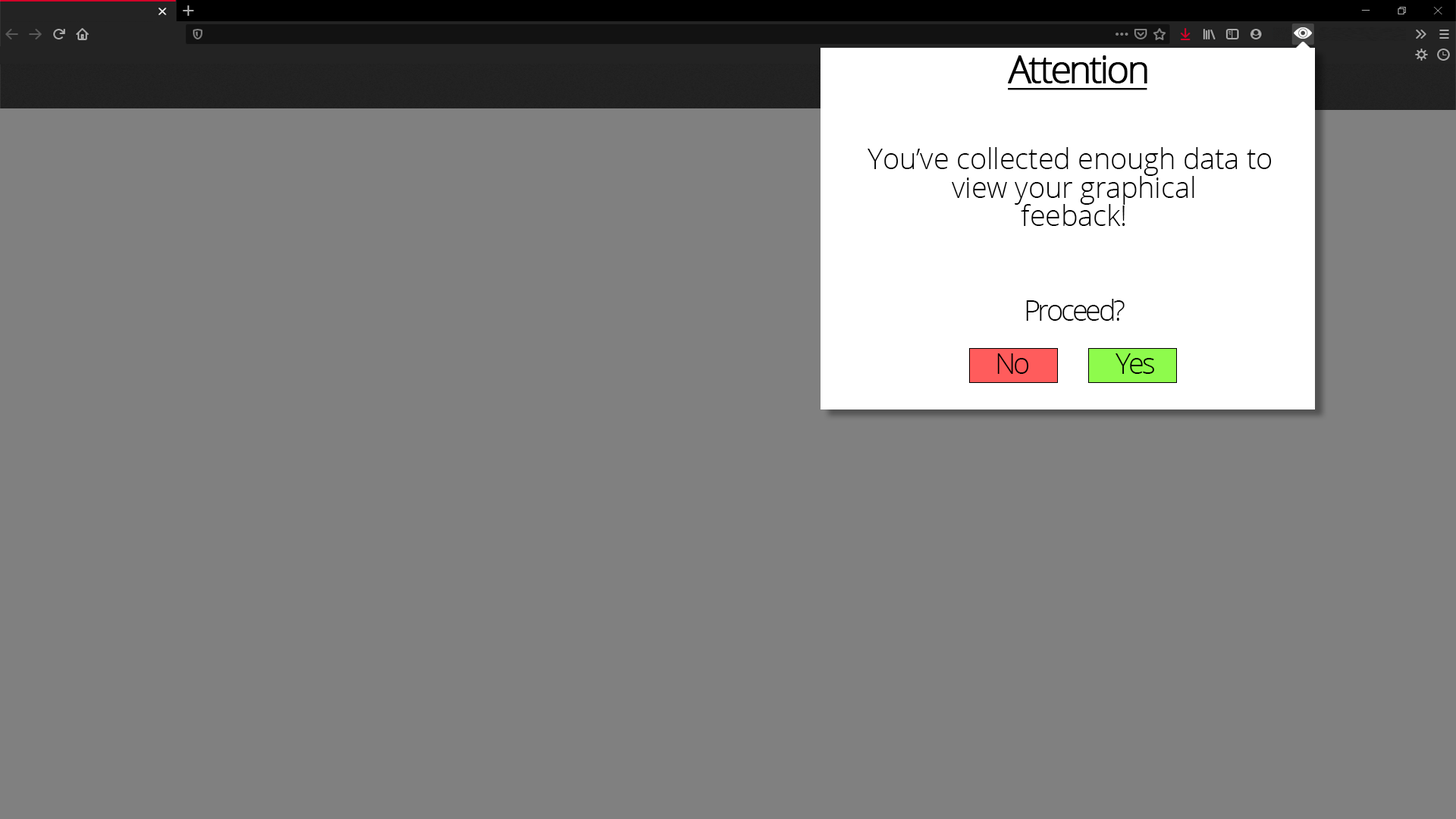
<style>
.page{position:relative;width:1456px;height:819px;background:#808080}
.page>*{position:absolute;margin:0}
.t1{font:37.9px "OpenSans-Light";letter-spacing:-0.08em;color:#000000;font-weight:bold;text-decoration:underline}
.t2{font:28.4px/28.4px "OpenSans-Light";color:#000000}
.t3{font:28.4px "OpenSans-Light";letter-spacing:-0.08em;color:#000000}
</style>
<div class="page">
<p class="t1" style="left:1008px;top:55px;width:139px;height:35px">Attention</p>
<p class="t2" style="left:868px;top:147px;width:404px;height:79px;text-align:center">You’ve collected enough data to <br>view your graphical<br>feeback!</p>
<p class="t3" style="left:1026px;top:299px;width:99px;height:22px">Proceed?</p>
<p class="t3" style="left:997px;top:353px;width:32px;height:21px">No</p>
<p class="t3" style="left:1115px;top:353px;width:39px;height:21px">Yes</p>
</div>
